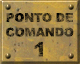
<style>
.page{position:relative;width:80px;height:64px}
.page>*{position:absolute;margin:0}
.t1{font:12px/14.7px "Arial-Black";letter-spacing:-0.015em;text-transform:uppercase}
.t2{font:20px/20px "Arial-Black";letter-spacing:-0.055em;text-transform:uppercase}
</style>
<div class="page">
<p class="t1" style="left:6px;top:13px;width:68px;height:44px;text-align:center">Ponto de<br>comando<br><span class="t2">1</span></p>
</div>
